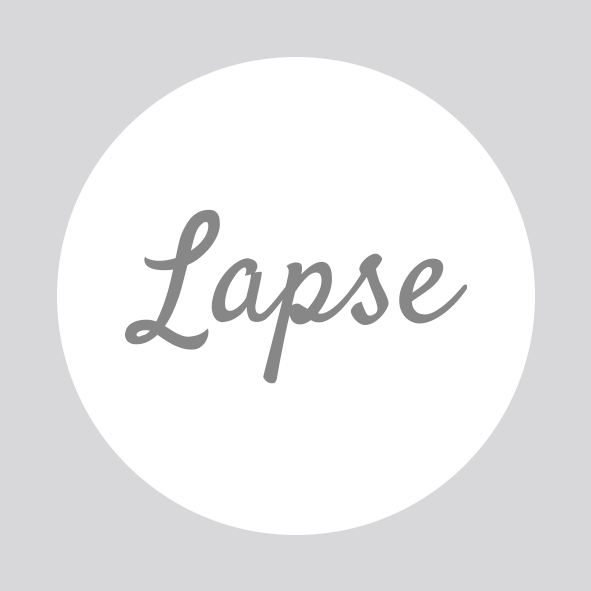
<style>
.page{position:relative;width:591px;height:591px;background:#d8d7d9}
.page>*{position:absolute;margin:0}
.t1{font:150px "Satisfy-Regular";color:#888787}
</style>
<div class="page">
<p class="t1" style="left:125px;top:209px;width:342px;height:175px">Lapse</p>
</div>
